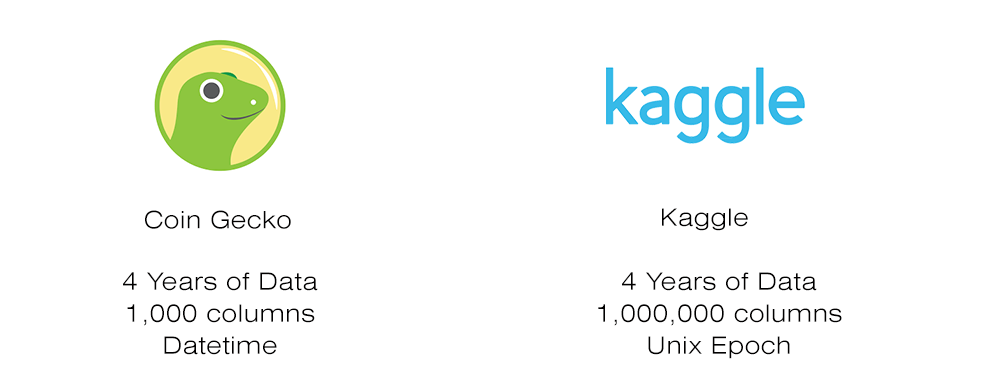
<style>
.page{position:relative;width:1000px;height:391px;background:#ffffff}
.page>*{position:absolute;margin:0}
.t1{font:24px "Swiss721BT-LightExtended";letter-spacing:0.024em;color:#010000}
.t2{font:24px/8px "Swiss721BT-LightExtended";letter-spacing:0.024em;color:#010000}
</style>
<div class="page">
<p class="t1" style="left:662px;top:208px;width:86px;height:23px">Kaggle</p>
<p class="t1" style="left:145px;top:210px;width:146px;height:19px">Coin Gecko</p>
<p class="t2" style="left:123px;top:272px;width:195px;height:83px;text-align:center">4 Years of Data<br><br><br><br>1,000 columns<br><br><br><br>Datetime</p>
<p class="t2" style="left:598px;top:272px;width:244px;height:87px;text-align:center">4 Years of Data<br><br><br><br>1,000,000 columns<br><br><br><br>Unix Epoch</p>
</div>
